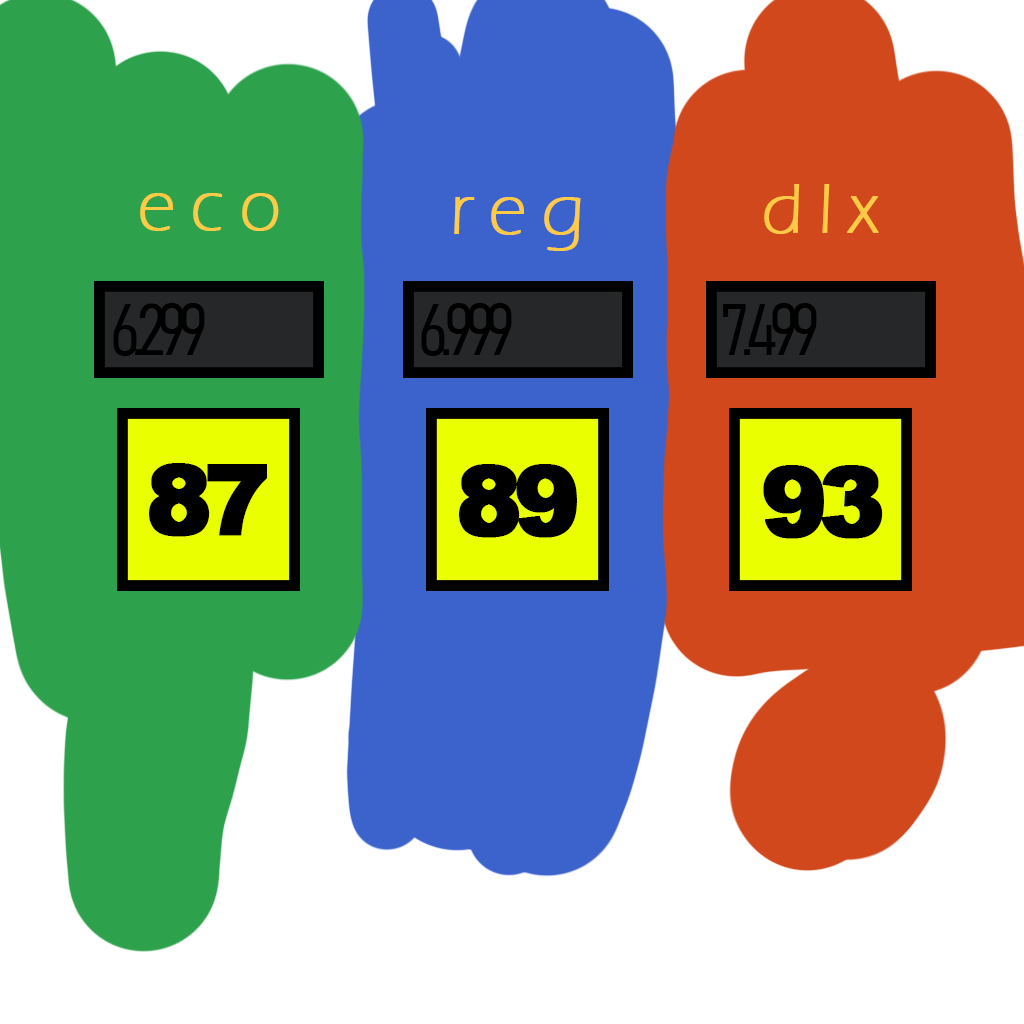
<style>
.page{position:relative;width:1024px;height:1024px;background:#ffffff}
.page>*{position:absolute;margin:0}
.t1{font:72px "ErasITC-Light";letter-spacing:0.2em;color:#ffcb46;font-weight:bold}
.t2{font:72px "Bahnschrift-LightCondensed";letter-spacing:-0.1em;color:#000000;font-weight:bold}
.t3{font:98.4px "Arial-Black";letter-spacing:-0.1em;color:#000000;font-weight:bold}
</style>
<div class="page">
<p class="t1" style="left:764px;top:184px;width:115px;height:50px">dlx</p>
<p class="t1" style="left:140px;top:193px;width:139px;height:38px">eco</p>
<p class="t1" style="left:454px;top:197px;width:127px;height:54px">reg</p>
<p class="t2" style="left:113px;top:303px;width:92px;height:53px">6.299</p>
<p class="t2" style="left:421px;top:303px;width:91px;height:53px">6.999</p>
<p class="t2" style="left:723px;top:303px;width:94px;height:52px">7.499</p>
<p class="t3" style="left:149px;top:463px;width:118px;height:74px">87</p>
<p class="t3" style="left:459px;top:464px;width:118px;height:74px">89</p>
<p class="t3" style="left:763px;top:465px;width:120px;height:74px">93</p>
</div>
